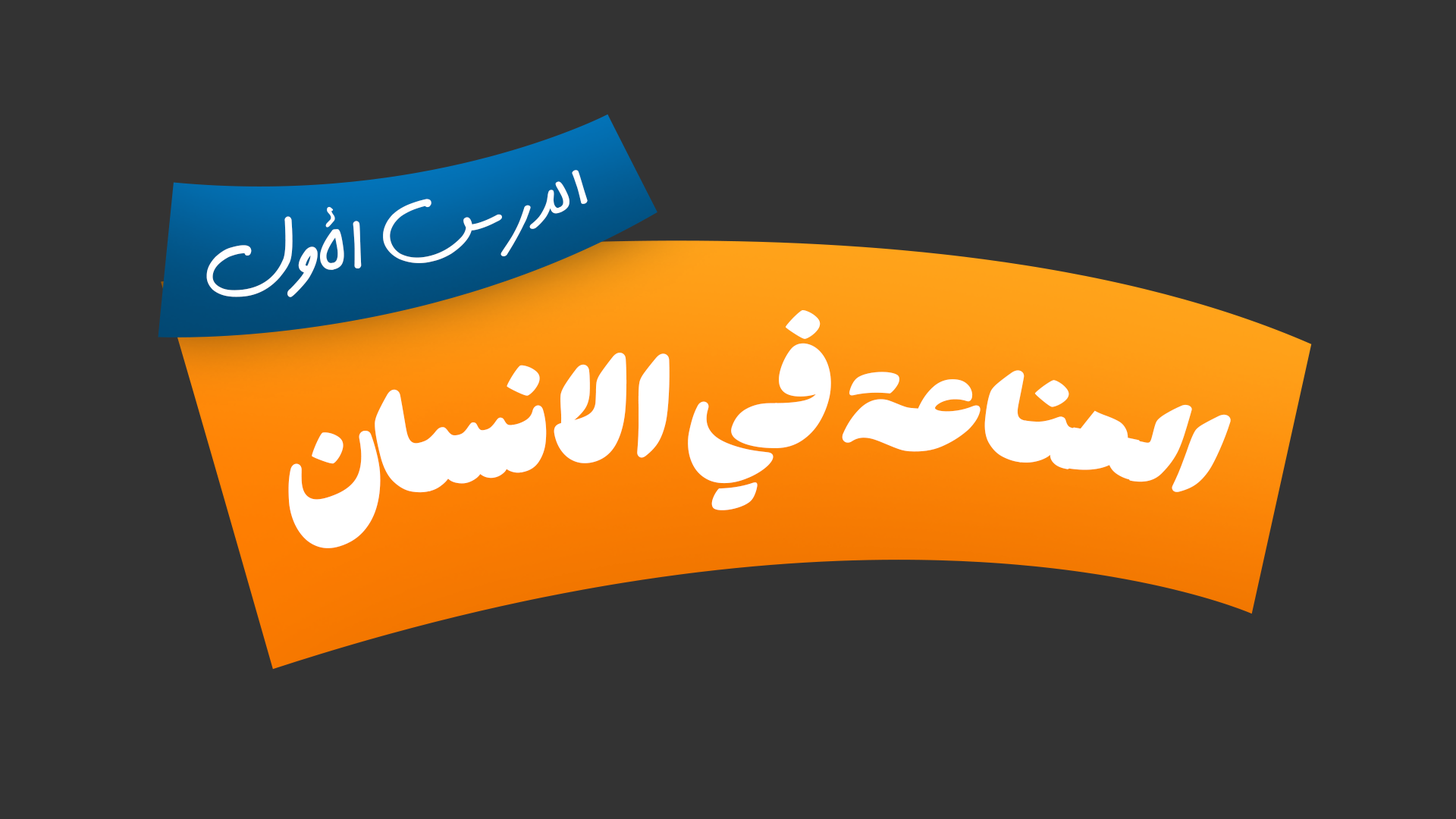
<style>
.page{position:relative;width:1456px;height:819px;background:#333333}
.page>*{position:absolute;margin:0}
.t1{font:78.8px "DastNevis";color:#ffffff}
.t2{font:123px "Hasti-Heavy";color:#ffffff}
</style>
<div class="page">
<p class="t1" style="left:206px;top:170px;width:382px;height:127px;rotate:-11deg">الدرس الأول</p>
<p class="t2" style="left:288px;top:310px;width:943px;height:238px;rotate:-1deg">المناعة في الانسان</p>
</div>
